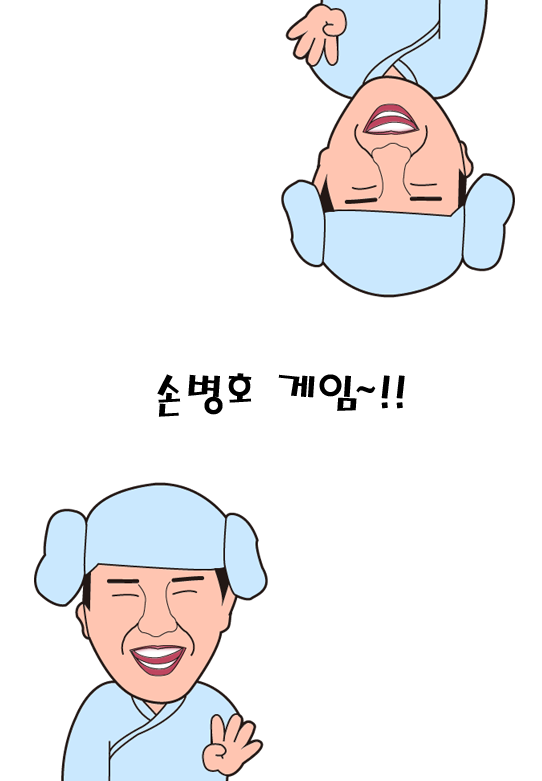
<style>
.page{position:relative;width:542px;height:781px;background:#ffffff}
.page>*{position:absolute;margin:0}
.t1{font:48px "MagicR-HM";color:#000000}
</style>
<div class="page">
<p class="t1" style="left:157px;top:373px;width:248px;height:44px">손병호 게임~!!</p>
</div>
